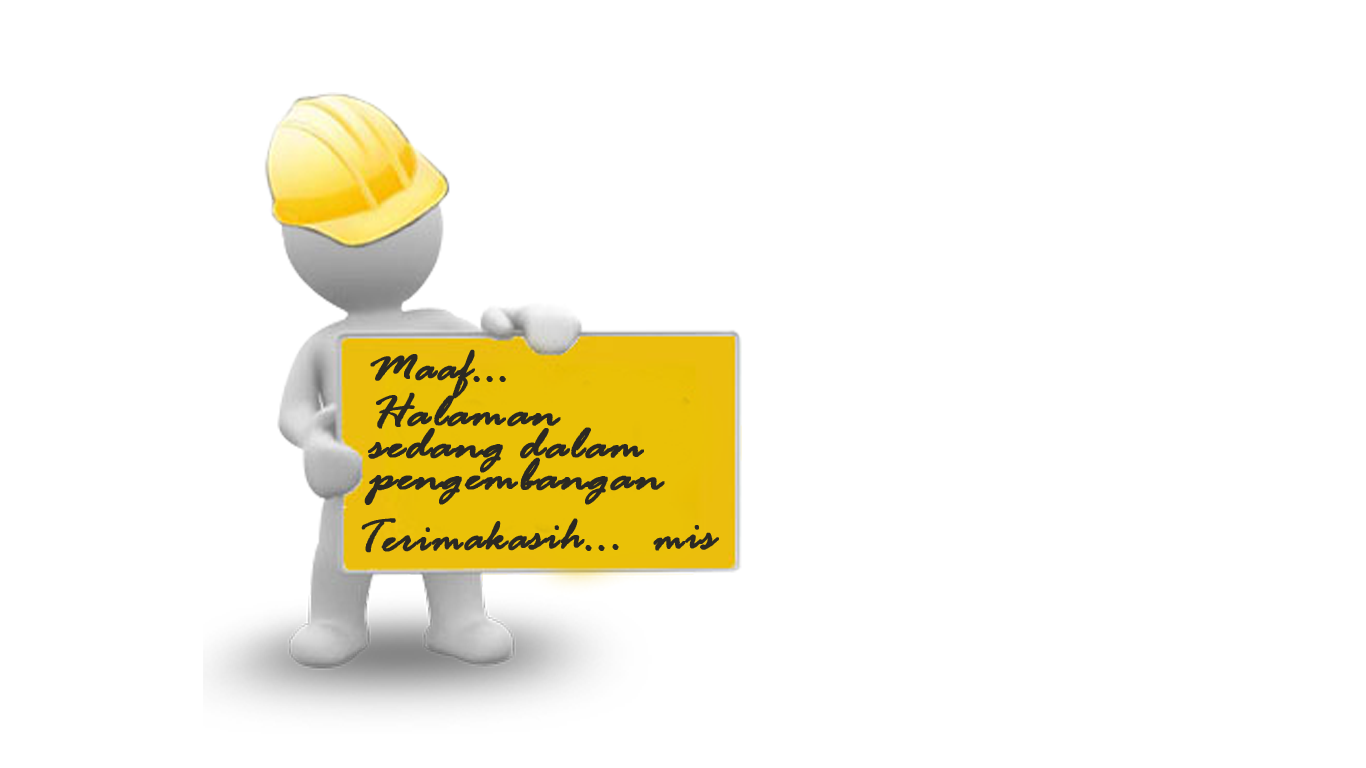
<style>
.page{position:relative;width:1366px;height:768px;background:#ffffff}
.page>*{position:absolute;margin:0}
.t1{font:48.5px "RageItalic";color:#2b2923;font-weight:bold}
.t2{font:48.5px/31.8px "RageItalic";color:#2b2923;font-weight:bold;scale:1.1 1}
</style>
<div class="page">
<p class="t1" style="left:370px;top:349px;width:136px;height:50px">Maaf...</p>
<p class="t2" style="left:364px;top:392px;width:301px;height:113px">Halaman <br>sedang dalam<br>pengembangan</p>
<p class="t1" style="left:361px;top:518px;width:258px;height:35px;rotate:-1deg">Terimakasih...</p>
<p class="t1" style="left:653px;top:525px;width:66px;height:26px;rotate:-3deg">mis</p>
</div>
